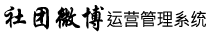
<style>
.page{position:relative;width:210px;height:36px;background:#ffffff}
.page>*{position:absolute;margin:0}
.t1{font:18px "MicrosoftJhengHeiRegular";color:#000000;text-transform:uppercase;scale:0.93 1}
.t2{font:28px "STXingkai";color:#000000;text-transform:uppercase;scale:0.93 1}
</style>
<div class="page">
<p class="t1" style="left:4px;top:5px;width:202px;height:27px"><span class="t2">社团微博</span>运营管理系统</p>
</div>
